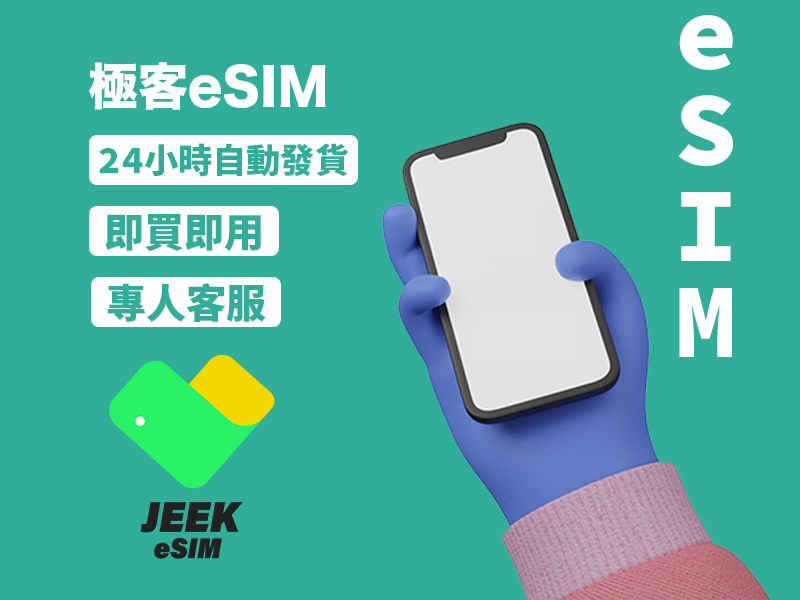
<style>
.page{position:relative;width:800px;height:600px;background:#30ae99}
.page>*{position:absolute;margin:0}
.t1{font:95.5px/96px "SourceHanMonoSC-Heavy";color:#ffffff}
.t2{font:50px "HiraKakuStdN-W8";color:#ffffff}
.t3{font:34.2px "SourceHanMonoSC-Heavy";color:#30ae99}
.t4{font:40.1px "SourceHanMonoSC-Heavy";color:#30ae99}
</style>
<div class="page">
<p class="t1" style="left:678px;top:15px;width:55px;height:342px;text-align:center">e<br>S<br>I<br>M</p>
<p class="t2" style="left:88px;top:62px;width:238px;height:48px">極客eSIM</p>
<p class="t3" style="left:99px;top:143px;width:249px;height:34px">24小時自動發貨</p>
<p class="t4" style="left:105px;top:214px;width:156px;height:37px">即買即用</p>
<p class="t4" style="left:107px;top:283px;width:159px;height:39px">專人客服</p>
</div>
